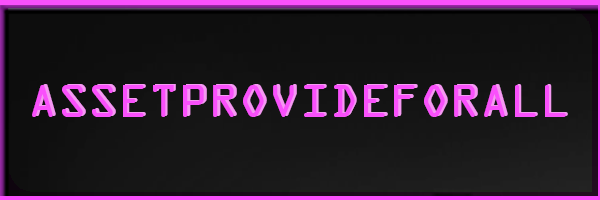
<style>
.page{position:relative;width:600px;height:200px}
.page>*{position:absolute;margin:0}
.t1{font:49.9px "OCRAExtended";color:#f950fb}
.t2{font:49.9px "OCRAExtended"}
</style>
<div class="page">
<p class="t1" style="left:32px;top:85px;width:534px;height:32px">ASSETPROVIDEFORALL</p>
<p class="t2" style="left:35px;top:84px;width:533px;height:32px">ASSETPROVIDEFORALL</p>
</div>
